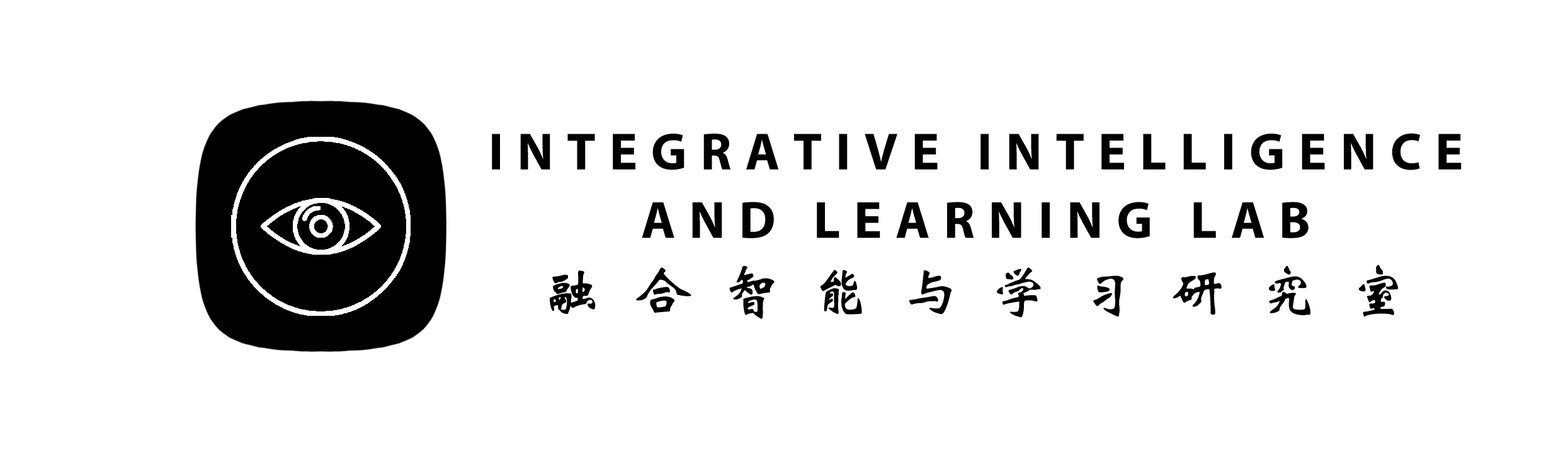
<style>
.page{position:relative;width:1568px;height:452px;background:#ffffff}
.page>*{position:absolute;margin:0}
.t1{font:52.5px/68.2px "MyriadPro-Bold";letter-spacing:0.26em;color:#000000}
.t2{font:57.7px/68.2px "STXinwei";letter-spacing:0.52em;color:#000000;font-weight:bold}
</style>
<div class="page">
<p class="t1" style="left:492px;top:133px;width:970px;height:186px;text-align:center">INTEGRATIVE INTELLIGENCE<br>AND LEARNING LAB<br><span class="t2">融合智能与学习研究室</span></p>
</div>
